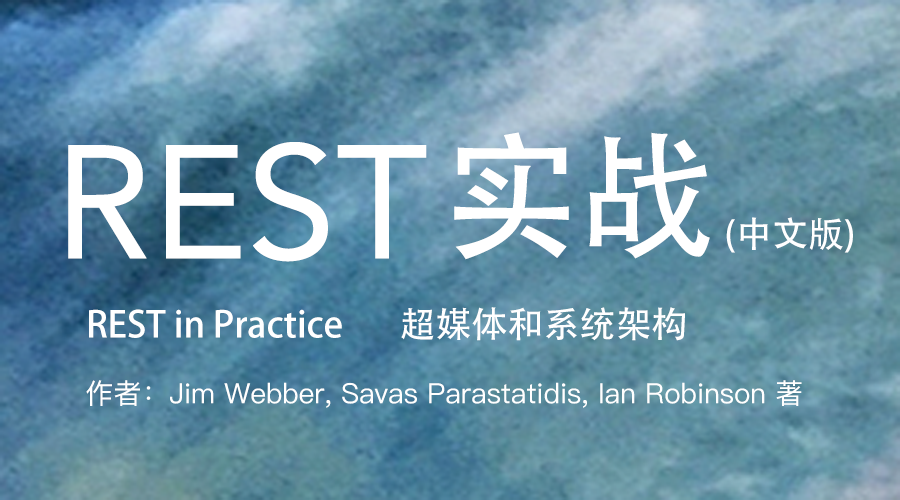
<style>
.page{position:relative;width:900px;height:500px}
.page>*{position:absolute;margin:0}
.t1{font:136px "AdobeHeitiStd-Regular";color:#ffffff}
.t2{font:160px "Avenir-Roman";color:#ffffff}
.t3{font:36px "AdobeHeitiStd-Regular";color:#ffffff}
.t4{font:28px "PingFangSC-Regular";color:#ffffff}
</style>
<div class="page">
<p class="t1" style="left:454px;top:132px;width:256px;height:128px">实战</p>
<p class="t2" style="left:68px;top:142px;width:359px;height:120px">REST</p>
<p class="t3" style="left:726px;top:217px;width:127px;height:36px">(中文版)</p>
<p class="t3" style="left:89px;top:307px;width:596px;height:34px">REST in Practice       超媒体和系统架构</p>
<p class="t4" style="left:86px;top:380px;width:716px;height:28px">作者：Jim Webber, Savas Parastatidis, Ian Robinson 著</p>
</div>
